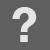
<style>
.page{position:relative;width:50px;height:50px;background:#5f5f5f}
.page>*{position:absolute;margin:0}
.t1{font:48px "HelveticaNeue-Bold";color:#e5e5e5}
</style>
<div class="page">
<p class="t1" style="left:12px;top:7px;width:25px;height:35px">?</p>
</div>
